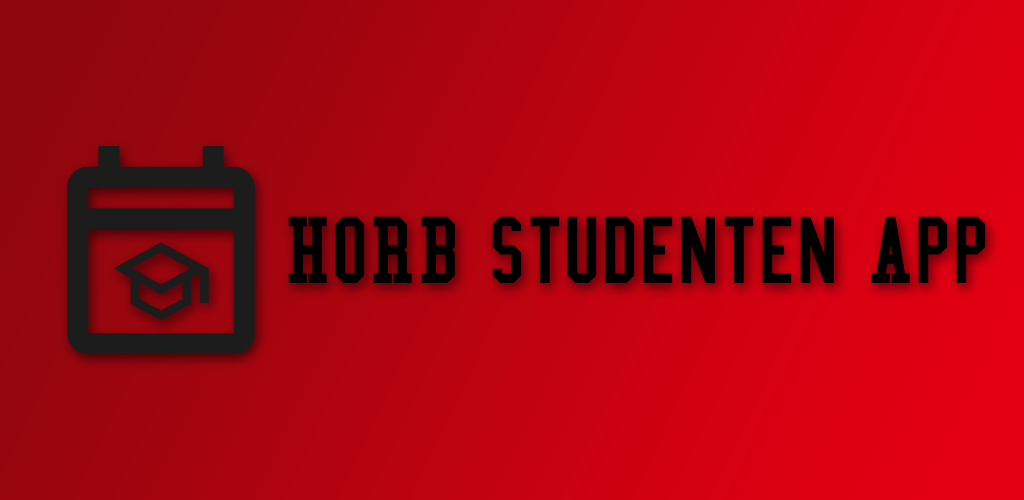
<style>
.page{position:relative;width:1024px;height:500px}
.page>*{position:absolute;margin:0}
.t1{font:97px "CollegeCondensed";color:#000000}
</style>
<div class="page">
<p class="t1" style="left:288px;top:216px;width:698px;height:67px">HORB Studenten App</p>
</div>
